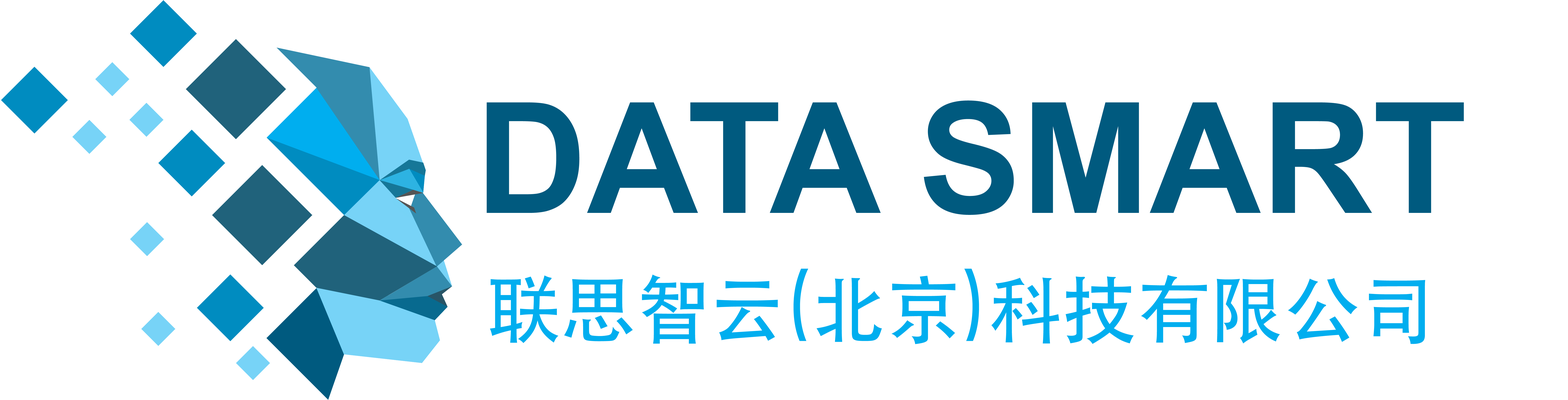
<style>
.page{position:relative;width:1568px;height:400px;background:#ffffff}
.page>*{position:absolute;margin:0}
.t1{font:154.3px "Arial-BoldMT";color:#005a7f}
.t2{font:74.4px "STHeitiSC-Medium";color:#00aeef}
</style>
<div class="page">
<p class="t1" style="left:487px;top:100px;width:977px;height:115px">DATA SMART</p>
<p class="t2" style="left:490px;top:269px;width:935px;height:75px">联思智云(北京)科技有限公司</p>
</div>
